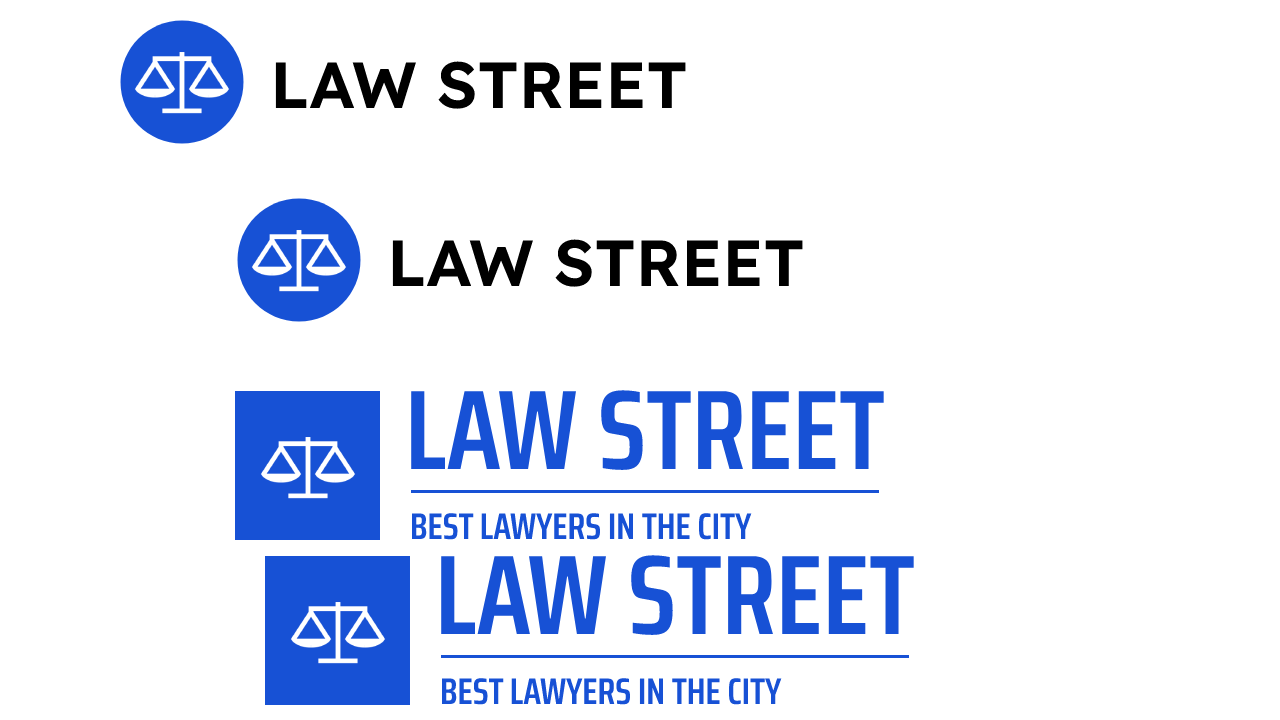
<style>
.page{position:relative;width:1280px;height:720px;background:#ffffff}
.page>*{position:absolute;margin:0}
.t1{font:65px "LexendDeca-SemiBold";color:#000000;text-transform:uppercase}
.t2{font:113px "SairaCondensed-SemiBold";color:#1751d5;text-transform:uppercase}
.t3{font:37px "SairaCondensed-SemiBold";color:#1751d5;text-transform:uppercase}
</style>
<div class="page">
<p class="t1" style="left:392px;top:239px;width:411px;height:48px">Law Street</p>
<p class="t2" style="left:411px;top:390px;width:473px;height:80px">Law Street</p>
<p class="t3" style="left:412px;top:513px;width:340px;height:27px">Best Lawyers in the City</p>
</div>
